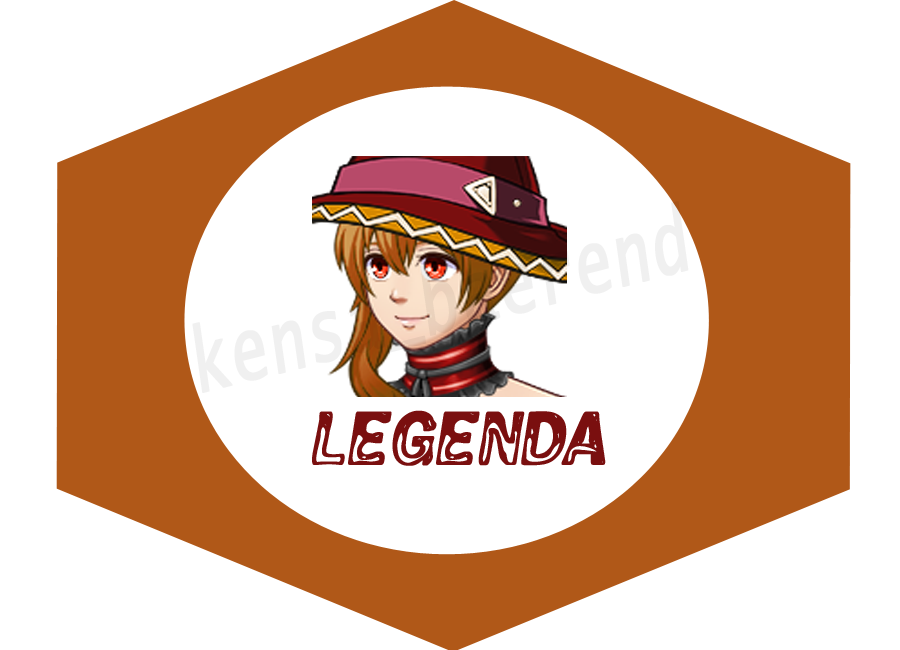
<style>
.page{position:relative;width:900px;height:650px;background:#ffffff}
.page>*{position:absolute;margin:0}
.t1{font:72px "WetPet-Regular";color:#7a0f0f;font-weight:bold;font-style:italic;scale:0.9 1}
</style>
<div class="page">
<p class="t1" style="left:312px;top:410px;width:294px;height:56px">LEGENDA</p>
</div>
